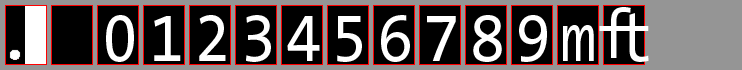
<style>
.page{position:relative;width:742px;height:70px;background:#000000}
.page>*{position:absolute;margin:0}
.t1{font:70px "TheSansMonoLF-M5Regular";letter-spacing:0.151em;color:#ffffff;scale:0.87 1}
.t2{font:70px "TheSansMonoLF-M5Regular";letter-spacing:0.13em;color:#ffffff;scale:0.87 1}
.t3{font:70px "TheSansMonoLF-M5Regular";letter-spacing:-0.005em;color:#ffffff;scale:0.87 1}
.t4{font:70px "TheSansMonoLF-M5Regular";letter-spacing:-0.265em;color:#ffffff;scale:0.87 1}
</style>
<div class="page">
<p class="t1" style="left:106px;top:7px;width:543px;height:55px">012345678<span class="t2">9</span><span class="t3">m</span><span class="t4">f</span><span class="t4">t</span></p>
</div>
